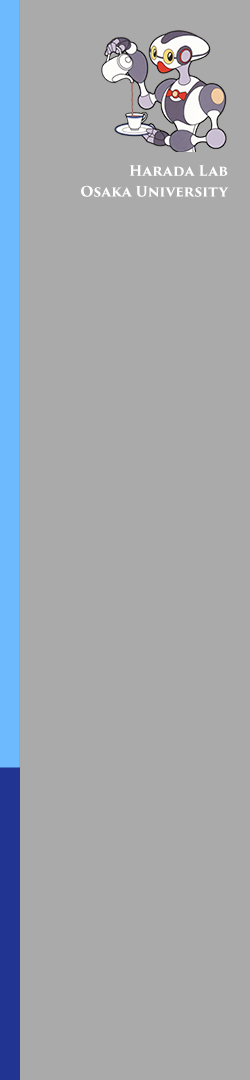
<style>
.page{position:relative;width:250px;height:1080px;background:#aaaaaa}
.page>*{position:absolute;margin:0}
.t1{font:14px "TrajanPro3-Bold";color:#ffffff}
</style>
<div class="page">
<p class="t1" style="left:129px;top:165px;width:99px;height:11px">Harada Lab</p>
<p class="t1" style="left:81px;top:185px;width:148px;height:12px">Osaka University</p>
</div>
